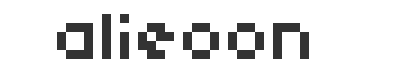
<style>
.page{position:relative;width:400px;height:80px;background:#ffffff}
.page>*{position:absolute;margin:0}
.t1{font:72px "04b03";color:#333333}
</style>
<div class="page">
<p class="t1" style="left:57px;top:14px;width:252px;height:45px">alieoon</p>
</div>
